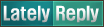
<style>
.page{position:relative;width:104px;height:27px}
.page>*{position:absolute;margin:0}
.t1{font:17px "H2hdrM"}
</style>
<div class="page">
<p class="t1" style="left:3px;top:5px;width:96px;height:18px">Lately Reply</p>
</div>
